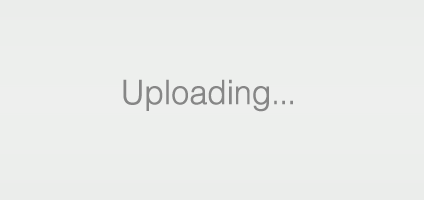
<style>
.page{position:relative;width:424px;height:200px;background:#edefed}
.page>*{position:absolute;margin:0}
.t1{font:33.6px "Helvetica-Light";color:#868686;font-weight:bold;scale:0.95 1}
</style>
<div class="page">
<p class="t1" style="left:123px;top:79px;width:170px;height:33px">Uploading...</p>
</div>
